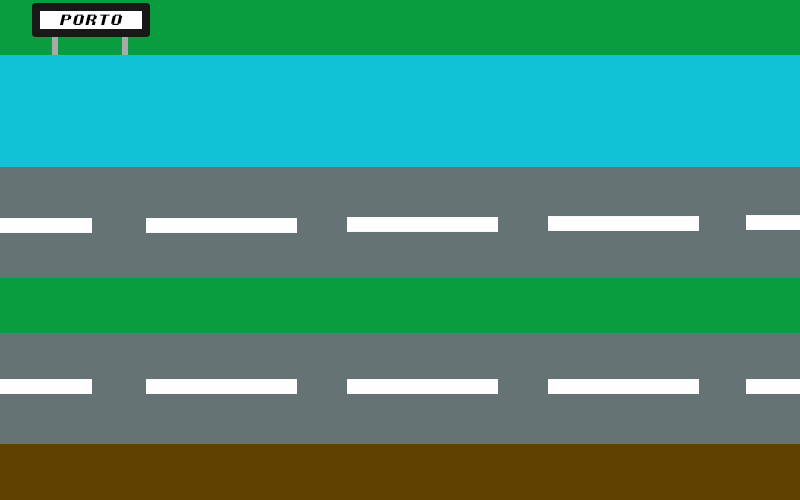
<style>
.page{position:relative;width:800px;height:500px;background:#667375}
.page>*{position:absolute;margin:0}
.t1{font:15px "Fixedsys";color:#000000;font-style:italic;scale:1.36 1}
</style>
<div class="page">
<p class="t1" style="left:59px;top:14px;width:64px;height:11px">PORTO</p>
</div>
